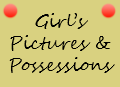
<style>
.page{position:relative;width:120px;height:87px;background:#d9d180}
.page>*{position:absolute;margin:0}
.t1{font:18px "SegoeScript";color:#000000}
</style>
<div class="page">
<p class="t1" style="left:9px;top:13px;width:106px;height:60px;text-align:center">Girl’s<br>Pictures &amp;<br>Possessions</p>
</div>
